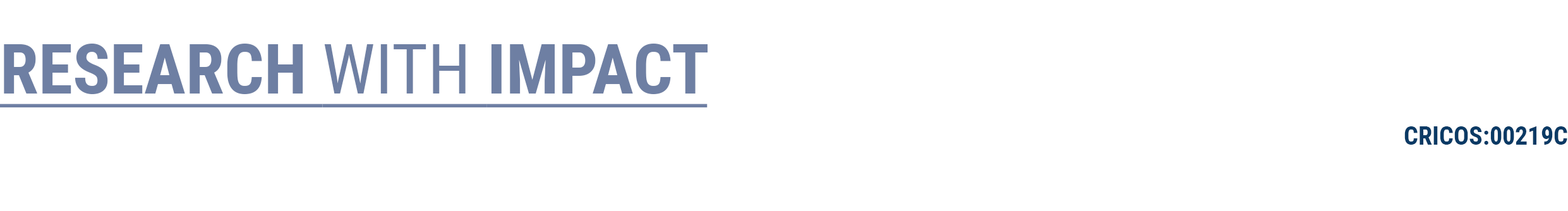
<style>
.page{position:relative;width:1568px;height:211px;background:#ffffff}
.page>*{position:absolute;margin:0}
.t1{font:69.5px "RobotoCondensed-Bold";color:#6e7fa3;text-decoration:underline}
.t2{font:69.5px "RobotoCondensed-Regular";color:#6e7fa3;text-decoration:underline}
.t3{font:25.3px "RobotoCondensed-Bold";color:#0a3a65}
</style>
<div class="page">
<p class="t1" style="left:0px;top:44px;width:708px;height:63px">RESEARCH <span class="t2">WITH </span>IMPACT</p>
<p class="t3" style="left:1404px;top:126px;width:163px;height:19px">CRICOS:00219C</p>
</div>
